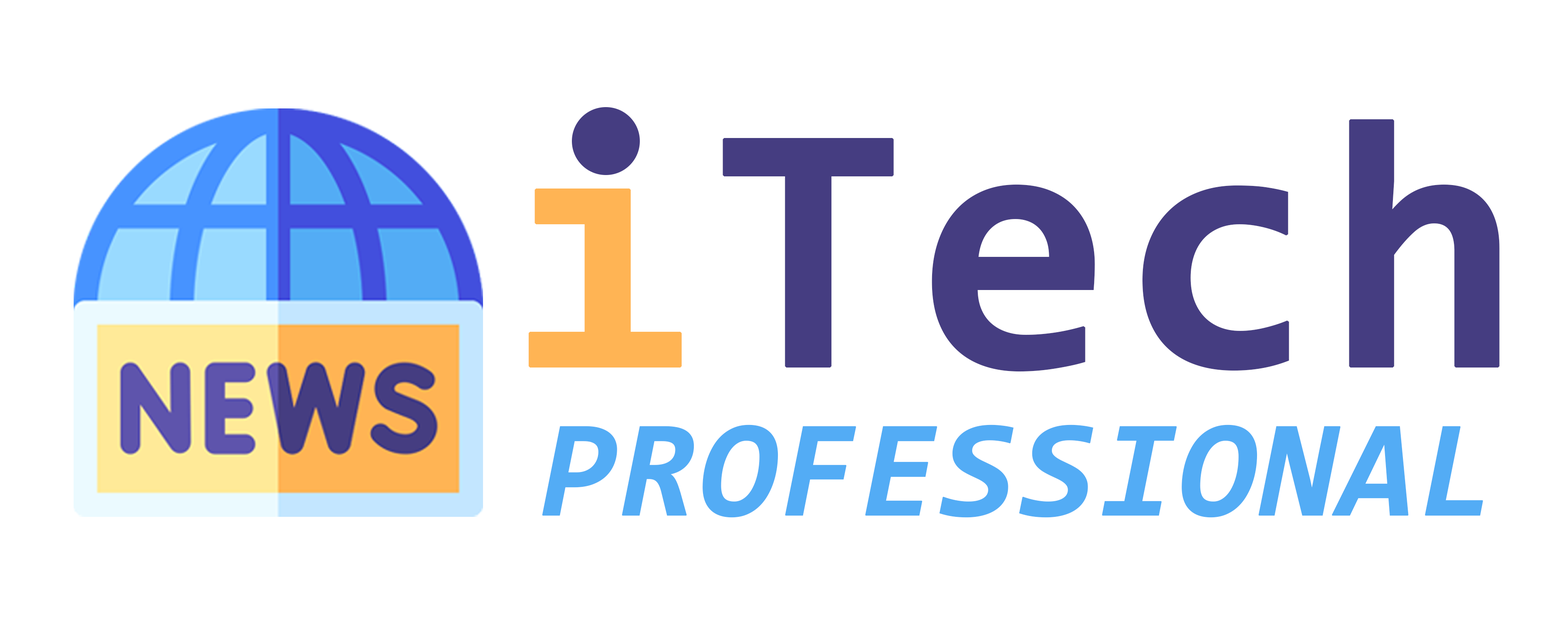
<style>
.page{position:relative;width:1568px;height:627px;background:#ffffff}
.page>*{position:absolute;margin:0}
.t1{font:355.9px "Consolas-Bold";color:#453d81;font-weight:bold}
.t2{font:355.9px "Consolas-Bold";color:#ffb454;font-weight:bold}
.t3{font:138.4px "Consolas-BoldItalic";color:#53acf5;font-weight:bold}
</style>
<div class="page">
<p class="t1" style="left:528px;top:112px;width:972px;height:260px"><span class="t2">i</span>Tech</p>
<p class="t3" style="left:542px;top:425px;width:941px;height:93px">PROFESSIONAL</p>
</div>
